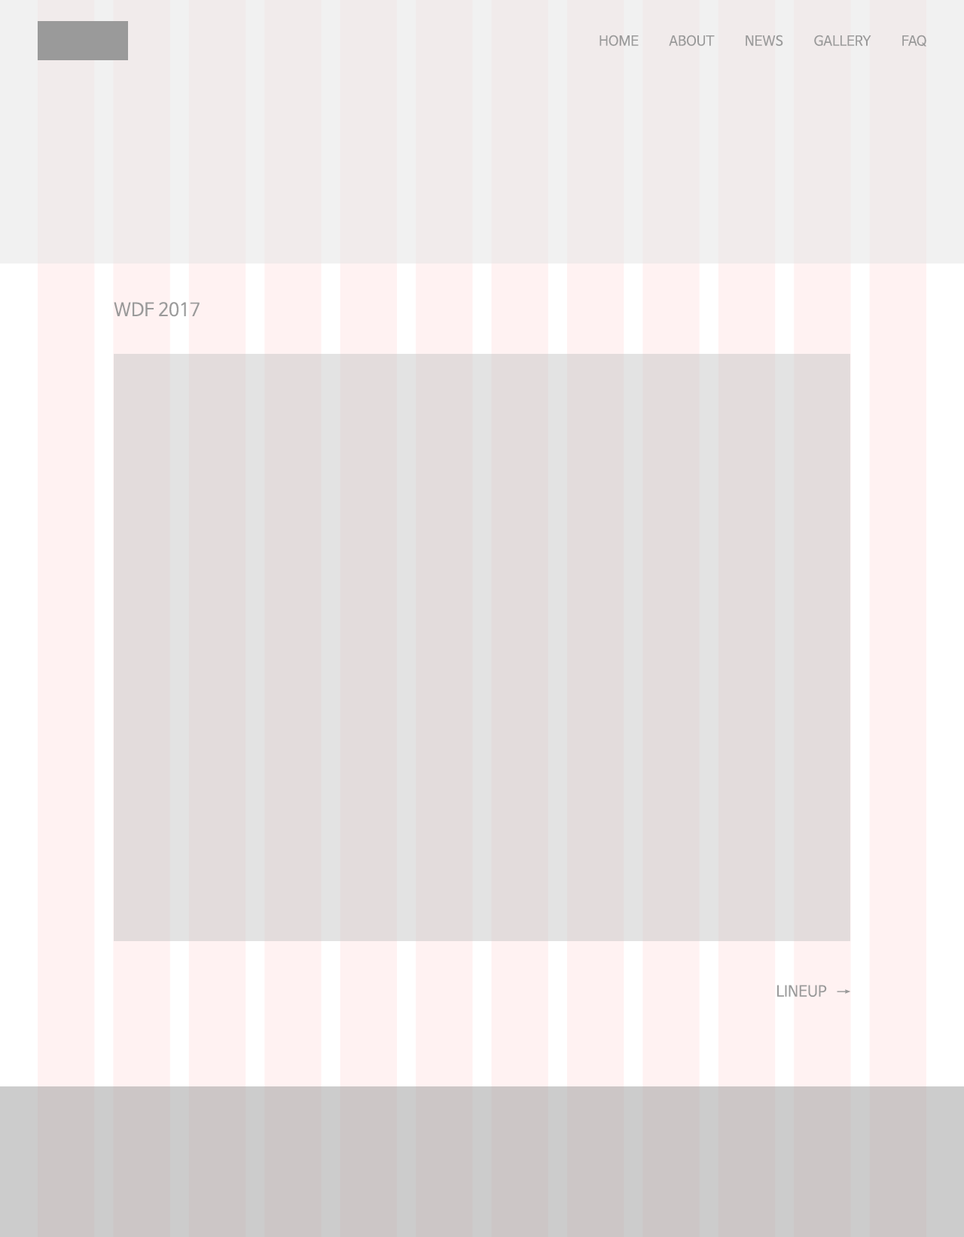
<style>
.page{position:relative;width:964px;height:1237px;background:#e3dcdc}
.page>*{position:absolute;margin:0}
.t1{font:13.6px "NanumBarunGothic";color:#9a9a9a}
.t2{font:18.1px "NanumBarunGothic";color:#9a9a9a}
.t3{font:15.1px "NanumBarunGothic";color:#9a9a9a}
</style>
<div class="page">
<p class="t1" style="left:599px;top:35px;width:327px;height:12px">HOME          ABOUT          NEWS          GALLERY          FAQ</p>
<p class="t2" style="left:114px;top:302px;width:86px;height:15px">WDF 2017</p>
<p class="t3" style="left:777px;top:985px;width:73px;height:12px">LINEUP   →</p>
</div>
